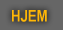
<style>
.page{position:relative;width:63px;height:30px;background:#666666}
.page>*{position:absolute;margin:0}
.t1{font:16px "ArialNarrow-Bold";color:#ffb706}
</style>
<div class="page">
<p class="t1" style="left:12px;top:10px;width:35px;height:12px">HJEM</p>
</div>
